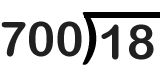
<style>
.page{position:relative;width:160px;height:75px;background:#ffffff}
.page>*{position:absolute;margin:0}
.t1{font:56px "ArialRoundedMTBold";color:#000000}
.t2{font:48px "ArialRoundedMTBold";color:#212020}
</style>
<div class="page">
<p class="t1" style="left:82px;top:12px;width:15px;height:53px">)</p>
<p class="t2" style="left:1px;top:21px;width:81px;height:36px">700</p>
<p class="t2" style="left:101px;top:24px;width:53px;height:36px">18</p>
</div>
